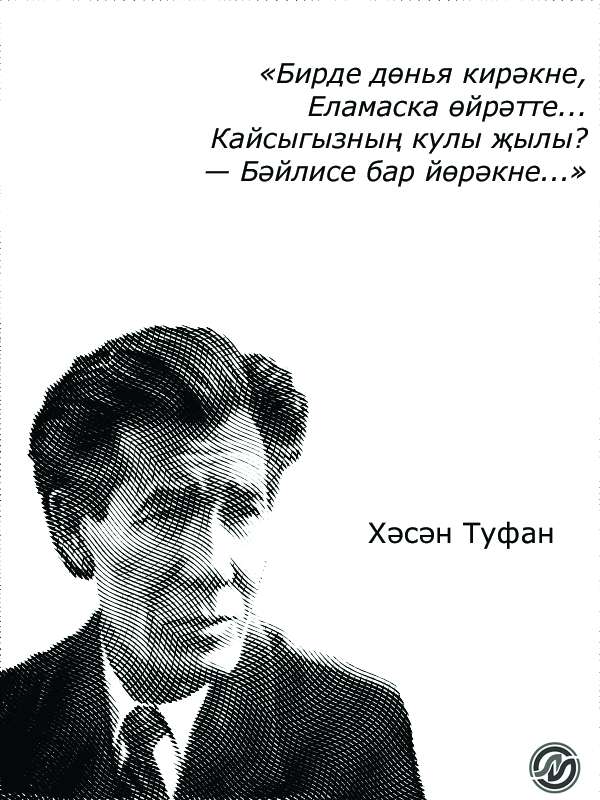
<style>
.page{position:relative;width:600px;height:800px;background:#ffffff}
.page>*{position:absolute;margin:0}
.t1{font:27px "Verdana-Italic";color:#050708}
.t2{font:28px "Verdana";color:#050708}
</style>
<div class="page">
<p class="t1" style="left:205px;top:63px;width:383px;height:124px;text-align:right">«Бирде дөнья кирәкне,<br>Еламаска өйрәтте...<br>Кайсыгызның кулы җылы?<br>— Бәйлисе бар йөрәкне...»</p>
<p class="t2" style="left:368px;top:521px;width:185px;height:28px">Хәсән Туфан</p>
</div>
